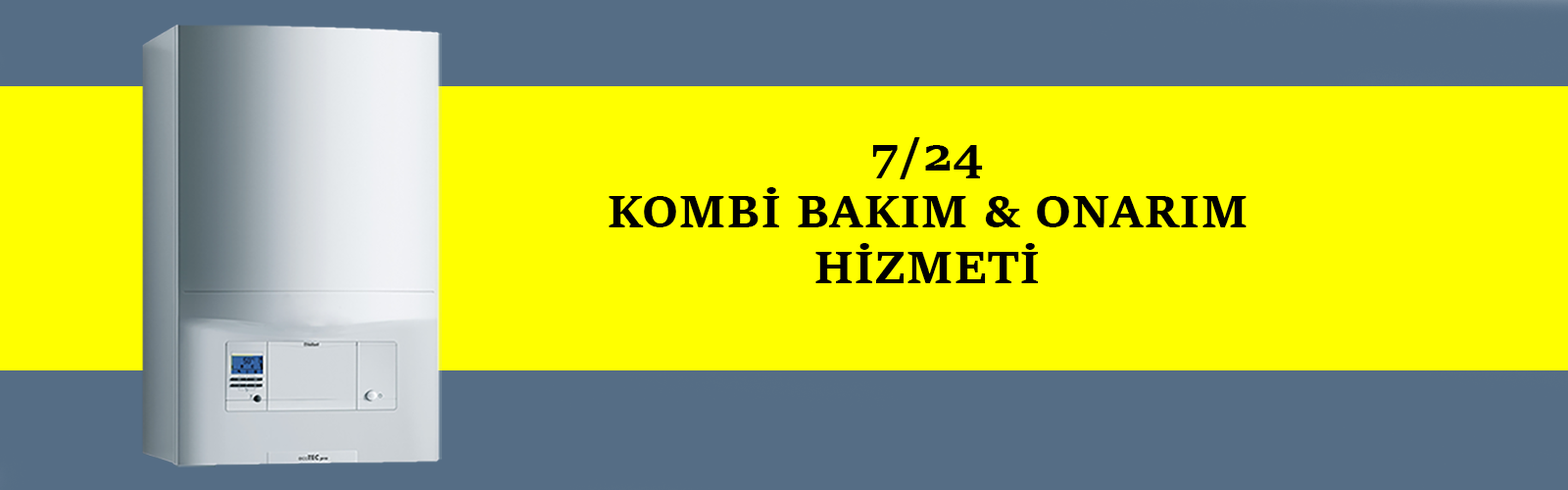
<style>
.page{position:relative;width:1568px;height:490px;background:#ffff00}
.page>*{position:absolute;margin:0}
.t1{font:47px "SitkaSmall-Bold";color:#000000}
</style>
<div class="page">
<p class="t1" style="left:609px;top:137px;width:638px;height:146px;text-align:center">7/24<br>KOMBİ BAKIM &amp; ONARIM<br>HİZMETİ</p>
</div>
